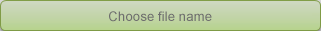
<style>
.page{position:relative;width:321px;height:31px}
.page>*{position:absolute;margin:0}
.t1{font:13.3px "ArialMT";color:#6e6e6e}
</style>
<div class="page">
<p class="t1" style="left:109px;top:11px;width:103px;height:11px">Choose file name</p>
</div>
